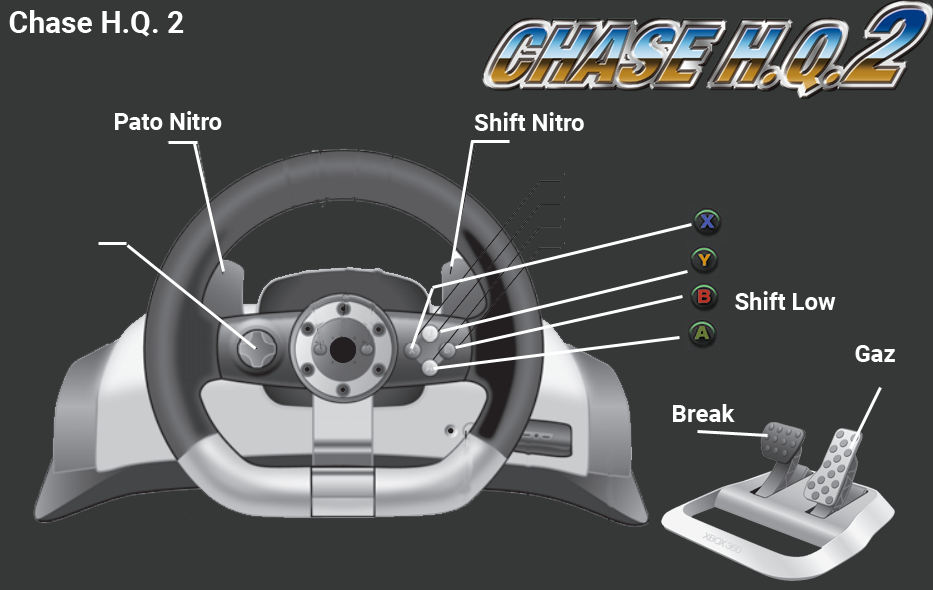
<style>
.page{position:relative;width:933px;height:590px;background:#363838}
.page>*{position:absolute;margin:0}
.t1{font:30px "Roboto-Bold";color:#ffffff}
.t2{font:24px "Roboto-Bold";color:#ffffff}
</style>
<div class="page">
<p class="t1" style="left:9px;top:10px;width:175px;height:27px">Chase H.Q. 2</p>
<p class="t2" style="left:115px;top:111px;width:107px;height:19px">Pato Nitro</p>
<p class="t2" style="left:474px;top:112px;width:110px;height:19px">Shift Nitro</p>
<p class="t2" style="left:735px;top:291px;width:101px;height:19px">Shift Low</p>
<p class="t2" style="left:855px;top:345px;width:40px;height:17px">Gaz</p>
<p class="t2" style="left:673px;top:404px;width:62px;height:18px">Break</p>
</div>
